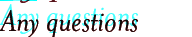
<style>
.page{position:relative;width:192px;height:37px;background:#ffffff}
.page>*{position:absolute;margin:0}
.t1{font:33.3px "MrsEavesItalic"}
</style>
<div class="page">
<p class="t1" style="left:0px;top:4px;width:138px;height:30px">Any questions</p>
</div>
